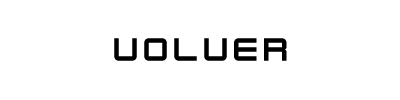
<style>
.page{position:relative;width:400px;height:100px;background:#ffffff}
.page>*{position:absolute;margin:0}
.t1{font:36px "KenVector-Future";color:#000000}
</style>
<div class="page">
<p class="t1" style="left:114px;top:38px;width:173px;height:23px">volver</p>
</div>
